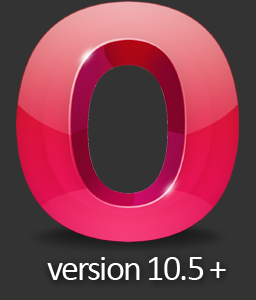
<style>
.page{position:relative;width:256px;height:300px;background:#333333}
.page>*{position:absolute;margin:0}
.t1{font:36px "Calibri";letter-spacing:-0.05em;color:#ffffff}
</style>
<div class="page">
<p class="t1" style="left:47px;top:257px;width:179px;height:23px">version 10.5 +</p>
</div>
